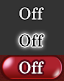
<style>
.page{position:relative;width:64px;height:81px;background:#333333}
.page>*{position:absolute;margin:0}
.t1{font:16px "CenturySchoolbook";letter-spacing:0.025em;color:#f1f1f1}
.t2{font:16px "CenturySchoolbook";letter-spacing:0.025em;color:#000000}
.t3{font:16px "CenturySchoolbook";letter-spacing:0.025em;color:#ffffff}
</style>
<div class="page">
<p class="t1" style="left:19px;top:7px;width:25px;height:13px">Off</p>
<p class="t2" style="left:19px;top:34px;width:25px;height:13px">Off</p>
<p class="t3" style="left:19px;top:61px;width:25px;height:13px">Off</p>
</div>
